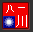
<style>
.page{position:relative;width:33px;height:32px;background:#f20000}
.page>*{position:absolute;margin:0}
.t1{font:10.4px "SimSun";color:#ffffff}
.t2{font:11.7px "SimSun";color:#ffffff}
</style>
<div class="page">
<p class="t1" style="left:6px;top:5px;width:19px;height:8px">八一</p>
<p class="t2" style="left:16px;top:15px;width:11px;height:12px">川</p>
</div>
